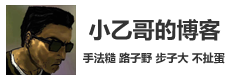
<style>
.page{position:relative;width:230px;height:80px;background:#ffffff}
.page>*{position:absolute;margin:0}
.t1{font:22px "MicrosoftYaHei-Bold";color:#333333}
.t2{font:11px "MicrosoftYaHei-Bold";color:#333333}
</style>
<div class="page">
<p class="t1" style="left:89px;top:19px;width:132px;height:22px">小乙哥的博客</p>
<p class="t2" style="left:83px;top:52px;width:142px;height:12px">手法糙 路子野 步子大 不扯蛋</p>
</div>
